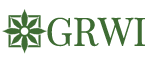
<style>
.page{position:relative;width:150px;height:57px;background:#ffffff}
.page>*{position:absolute;margin:0}
.t1{font:38.7px "PlayfairDisplay-Regular";letter-spacing:-0.024em;color:#3e6c33;font-weight:bold}
</style>
<div class="page">
<p class="t1" style="left:47px;top:17px;width:98px;height:30px">GRWI</p>
</div>
